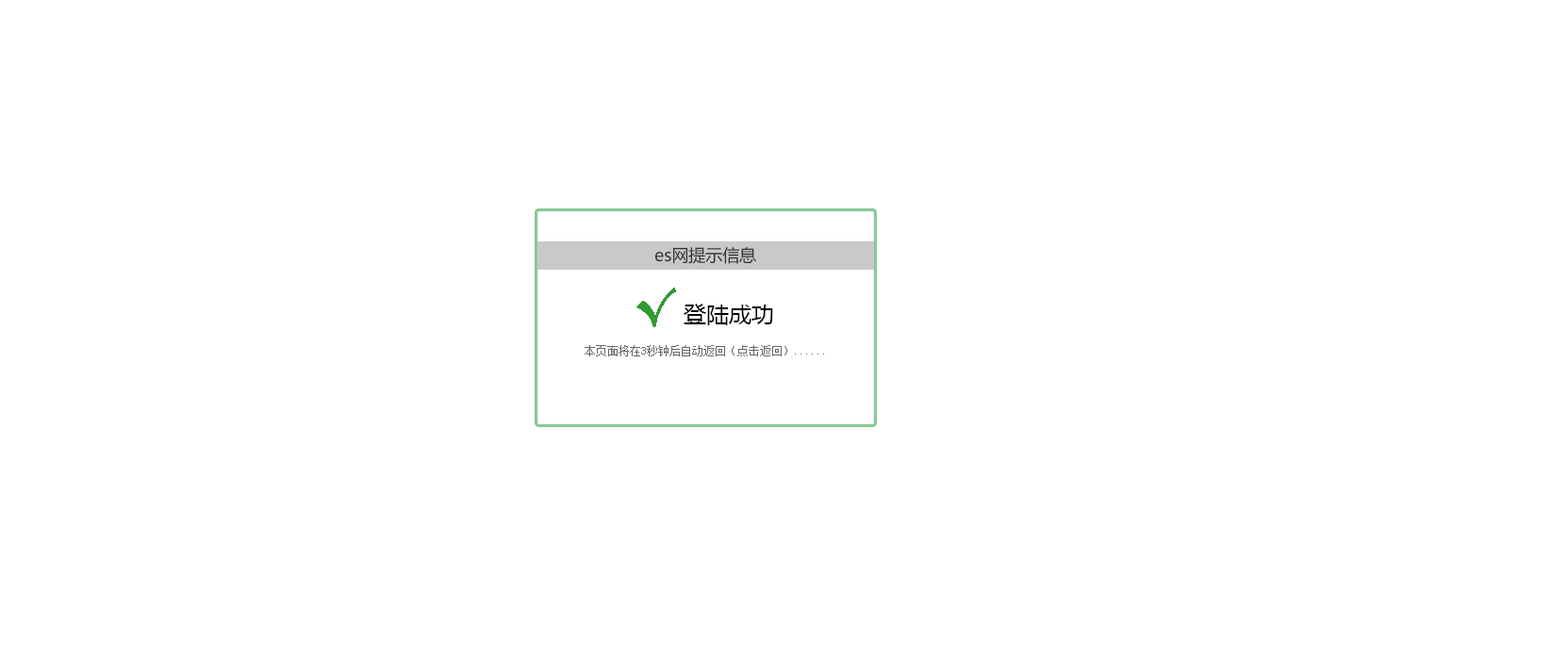
<style>
.page{position:relative;width:1568px;height:660px;background:#ffffff}
.page>*{position:absolute;margin:0}
.t1{font:16.9px "MicrosoftYaHei";color:#333333}
.t2{font:49px "BerlinSansFBDemi-Bold";color:#339933}
.t3{font:22.6px "MicrosoftYaHei";color:#000000}
.t4{font:11.3px "SimSun";color:#666666}
</style>
<div class="page">
<p class="t1" style="left:654px;top:247px;width:102px;height:17px">es网提示信息</p>
<p class="t2" style="left:636px;top:288px;width:40px;height:39px">√</p>
<p class="t3" style="left:684px;top:304px;width:89px;height:21px">登陆成功</p>
<p class="t4" style="left:585px;top:345px;width:239px;height:11px">本页面将在3秒钟后自动返回（点击返回）......</p>
</div>
